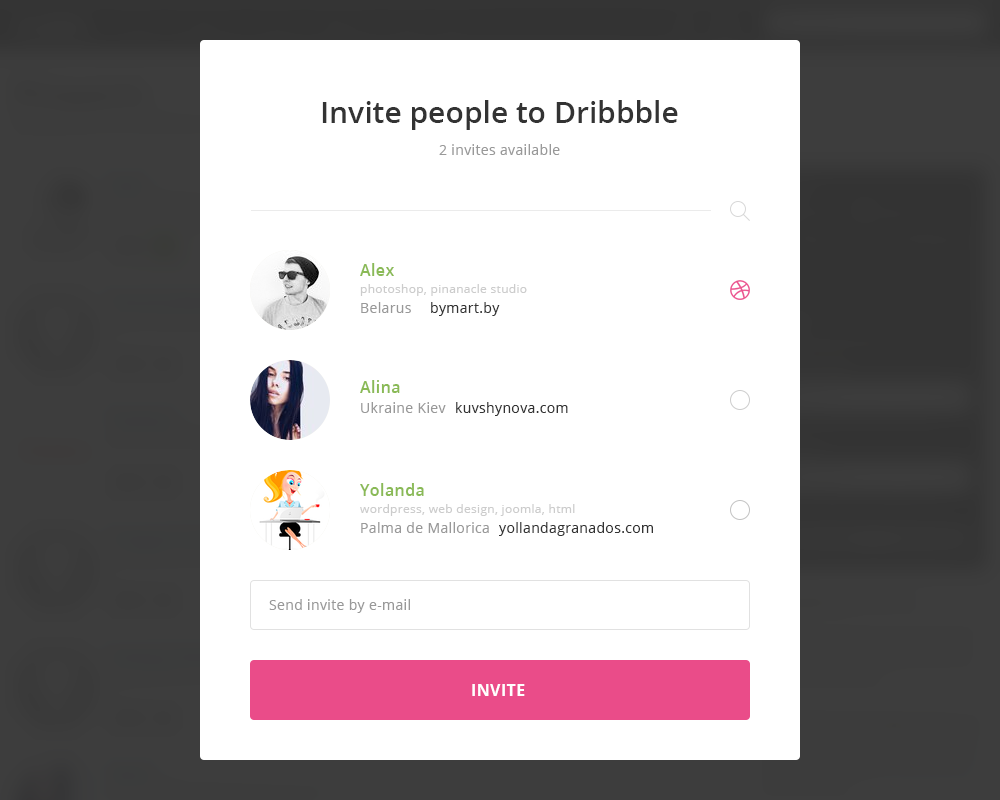
<style>
.page{position:relative;width:1000px;height:800px;background:#ffffff}
.page>*{position:absolute;margin:0}
.t1{font:30px "OpenSans-Semibold";color:#333333}
.t2{font:14px "OpenSans";letter-spacing:0.025em;color:#999999}
.t3{font:16px "OpenSans-Semibold";letter-spacing:0.025em;color:#8aba56}
.t4{font:12px "OpenSans";letter-spacing:0.025em;color:#cccccc}
.t5{font:14px "OpenSans";letter-spacing:0.025em;color:#333333}
.t6{font:16px "OpenSans-Bold";letter-spacing:0.025em;color:#ffffff;text-transform:uppercase}
</style>
<div class="page">
<p class="t1" style="left:322px;top:100px;width:356px;height:30px">Invite people to Dribbble</p>
<p class="t2" style="left:439px;top:144px;width:121px;height:11px">2 invites available</p>
<p class="t3" style="left:360px;top:263px;width:34px;height:13px">Alex</p>
<p class="t4" style="left:360px;top:284px;width:167px;height:12px">photoshop, pinanacle studio</p>
<p class="t2" style="left:361px;top:302px;width:50px;height:11px">Belarus</p>
<p class="t5" style="left:431px;top:302px;width:69px;height:14px">bymart.by</p>
<p class="t3" style="left:360px;top:380px;width:40px;height:13px">Alina</p>
<p class="t2" style="left:361px;top:402px;width:85px;height:11px">Ukraine Kiev</p>
<p class="t5" style="left:456px;top:402px;width:112px;height:14px">kuvshynova.com</p>
<p class="t3" style="left:360px;top:483px;width:64px;height:13px">Yolanda</p>
<p class="t4" style="left:360px;top:504px;width:215px;height:12px">wordpress, web design, joomla, html</p>
<p class="t2" style="left:361px;top:522px;width:128px;height:11px">Palma de Mallorica</p>
<p class="t5" style="left:499px;top:522px;width:154px;height:14px">yollandagranados.com</p>
<p class="t2" style="left:269px;top:599px;width:141px;height:14px">Send invite by e-mail</p>
<p class="t6" style="left:472px;top:684px;width:53px;height:12px">Invite</p>
</div>
